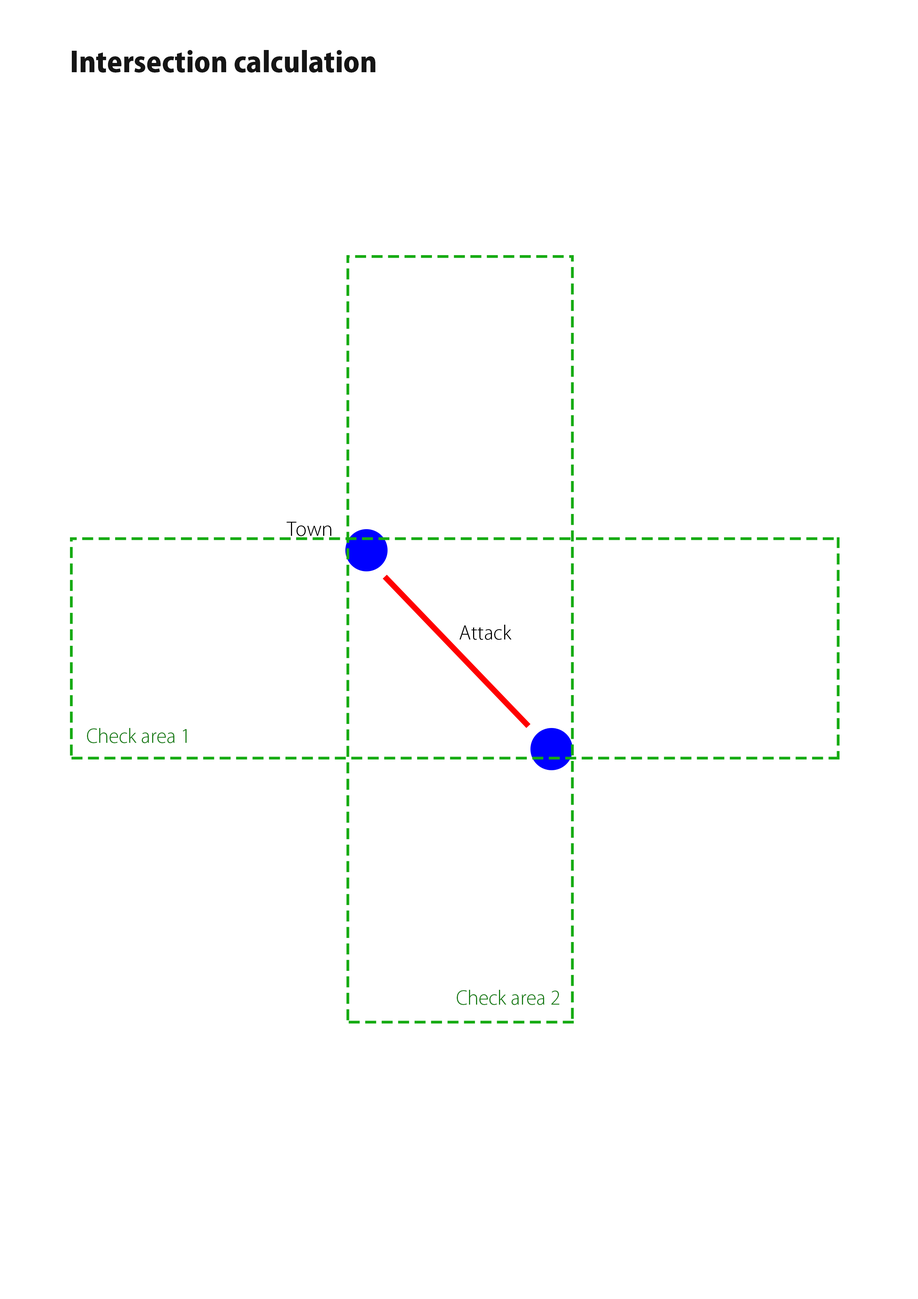
<style>
.page{position:relative;width:918px;height:1299px;background:#ffffff}
.page>*{position:absolute;margin:0}
.t1{font:27.8px "KozGoPr6N-Heavy";color:#151515}
.t2{font:18.5px "KozGoPr6N-Light";color:#000000}
.t3{font:18.5px "KozGoPr6N-Light";color:#1a7d18}
</style>
<div class="page">
<p class="t1" style="left:72px;top:50px;width:303px;height:23px">Intersection calculation</p>
<p class="t2" style="left:287px;top:522px;width:44px;height:14px">Town</p>
<p class="t2" style="left:459px;top:625px;width:53px;height:15px">Attack</p>
<p class="t3" style="left:87px;top:728px;width:100px;height:15px">Check area 1</p>
<p class="t3" style="left:457px;top:990px;width:102px;height:15px">Check area 2</p>
</div>
